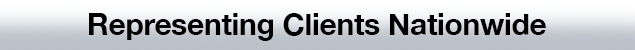
<style>
.page{position:relative;width:635px;height:50px}
.page>*{position:absolute;margin:0}
.t1{font:30px "HelveticaNeue-Bold";letter-spacing:-0.01em;color:#000000}
</style>
<div class="page">
<p class="t1" style="left:89px;top:13px;width:457px;height:28px">Representing Clients Nationwide</p>
</div>
